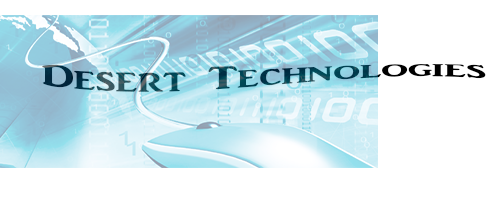
<style>
.page{position:relative;width:504px;height:216px;background:#ffffff}
.page>*{position:absolute;margin:0}
.t1{font:28.8px "ARJULIAN";scale:1.67 1}
</style>
<div class="page">
<p class="t1" style="left:42px;top:64px;width:444px;height:28px">Desert Technologies</p>
</div>
